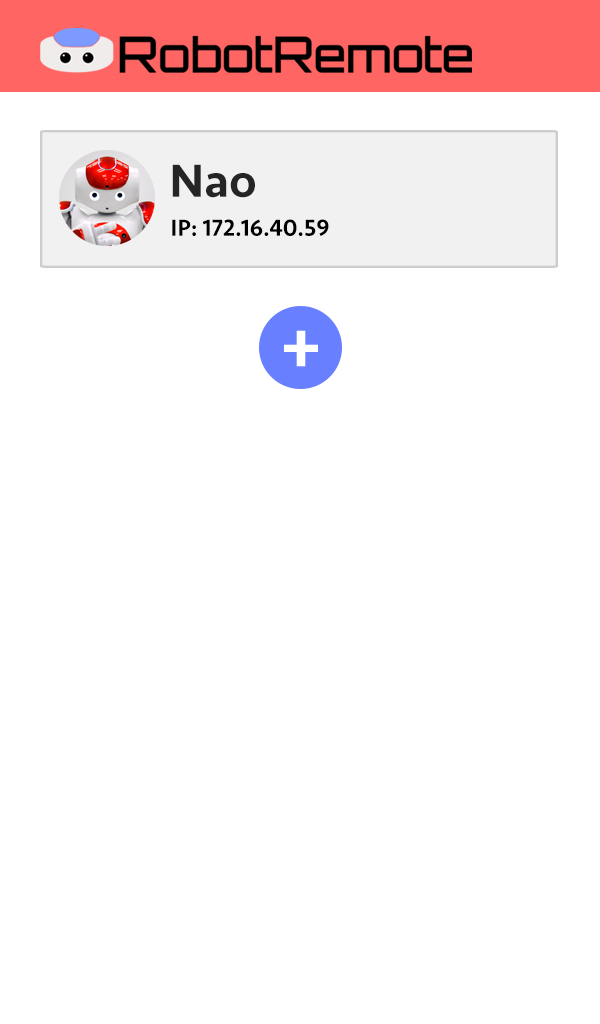
<style>
.page{position:relative;width:600px;height:1024px;background:#ffffff}
.page>*{position:absolute;margin:0}
.t1{font:48px "Seravek-Medium";color:#252525}
.t2{font:24px "Seravek-Medium";color:#000000}
.t3{font:72px "Seravek-Medium";color:#ffffff}
</style>
<div class="page">
<p class="t1" style="left:172px;top:164px;width:83px;height:34px">Nao</p>
<p class="t2" style="left:172px;top:219px;width:157px;height:17px">IP: 172.16.40.59</p>
<p class="t3" style="left:284px;top:330px;width:34px;height:37px">+</p>
</div>
